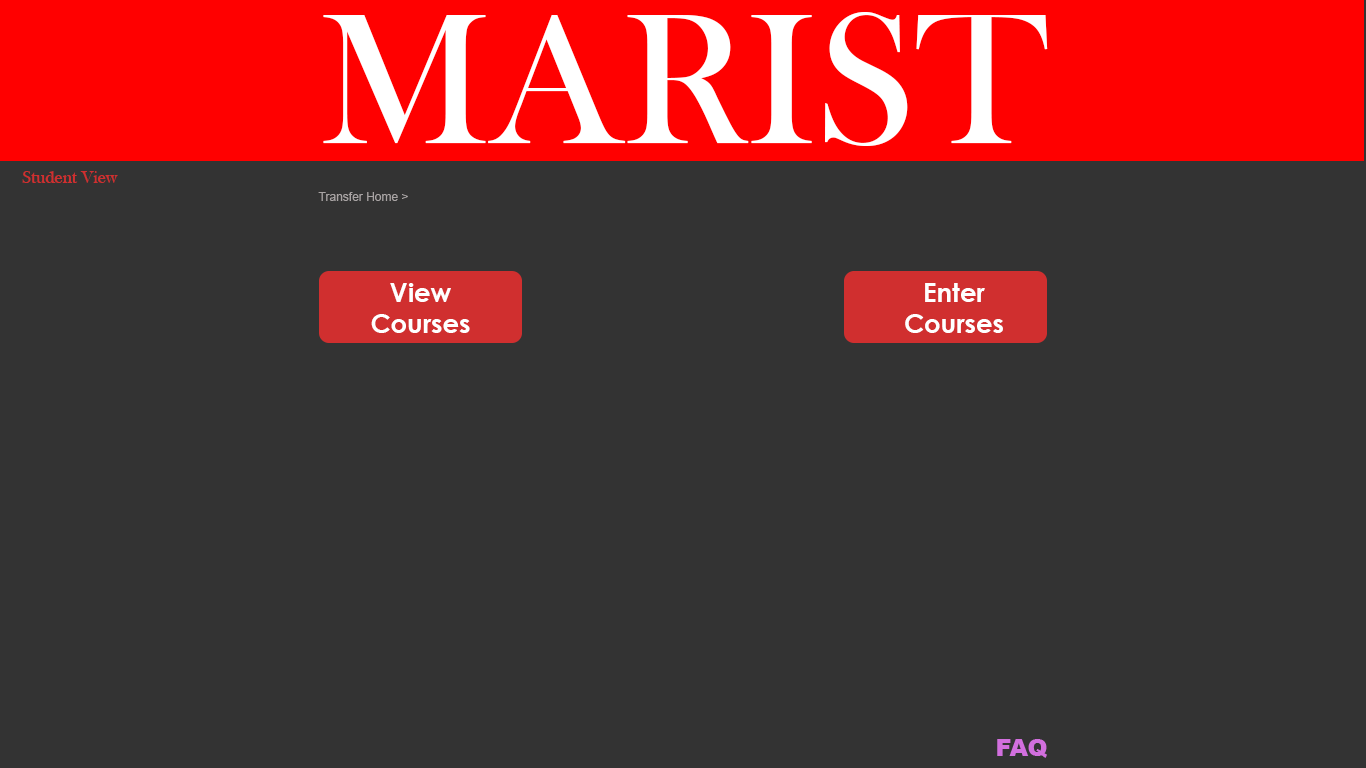
<style>
.page{position:relative;width:1366px;height:768px;background:#333333}
.page>*{position:absolute;margin:0}
.t1{font:192px "BaskOldFace";color:#ffffff}
.t2{font:18px "BaskOldFace";color:#d02f2f}
.t3{font:12px "ArialMT";color:#a9a4a4}
.t4{font:26px "CenturyGothic-Bold";color:#ffffff}
.t5{font:24px "Arial-Black";color:#d26fde}
</style>
<div class="page">
<p class="t1" style="left:323px;top:12px;width:725px;height:134px">MARIST</p>
<p class="t2" style="left:22px;top:171px;width:96px;height:12px">Student View</p>
<p class="t3" style="left:318px;top:192px;width:90px;height:9px">Transfer Home &gt;</p>
<p class="t4" style="left:371px;top:283px;width:99px;height:50px;text-align:center">View <br>Courses</p>
<p class="t4" style="left:905px;top:283px;width:98px;height:50px;text-align:center">Enter <br>Courses</p>
<p class="t5" style="left:997px;top:739px;width:50px;height:19px">FAQ</p>
</div>
